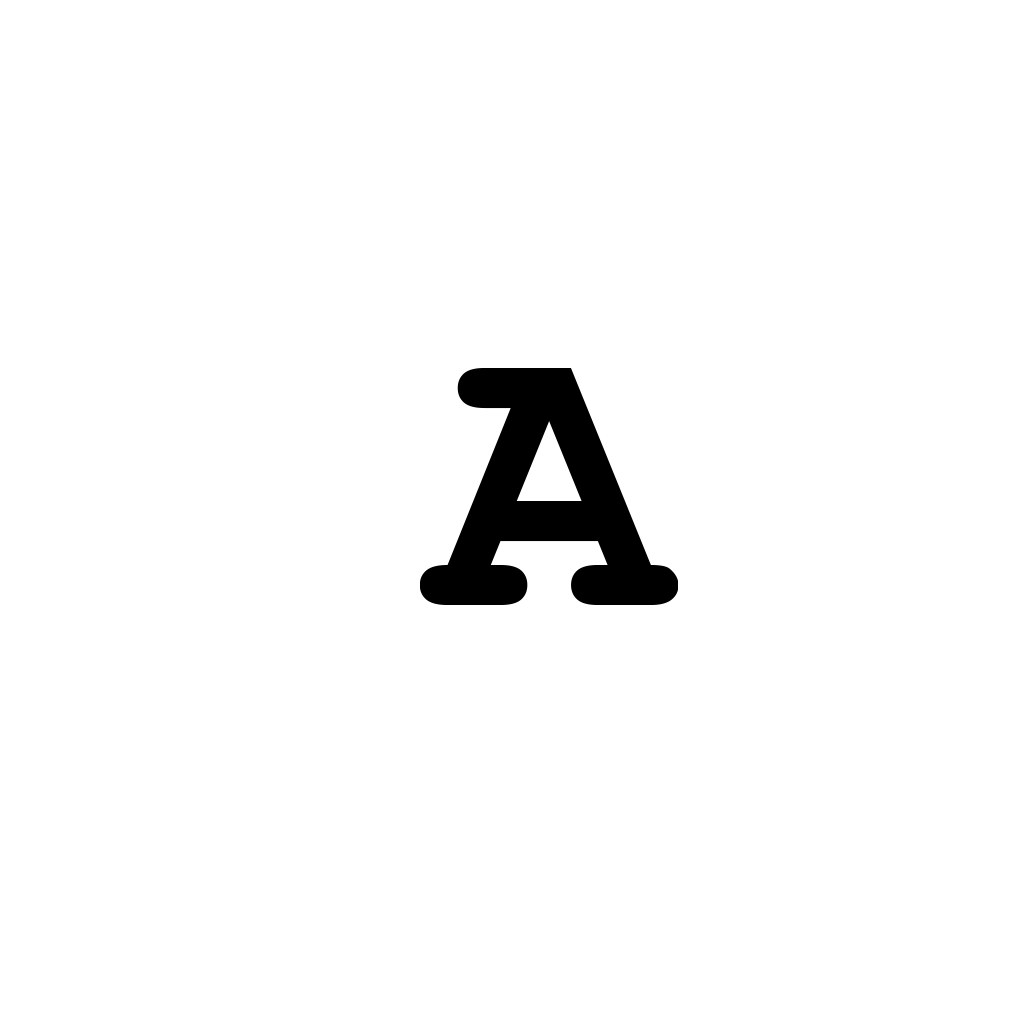
<style>
.page{position:relative;width:1024px;height:1024px;background:#ffffff}
.page>*{position:absolute;margin:0}
.t1{font:400px "CourierNewPS-BoldMT";color:#000000}
</style>
<div class="page">
<p class="t1" style="left:420px;top:368px;width:258px;height:237px">A</p>
</div>
